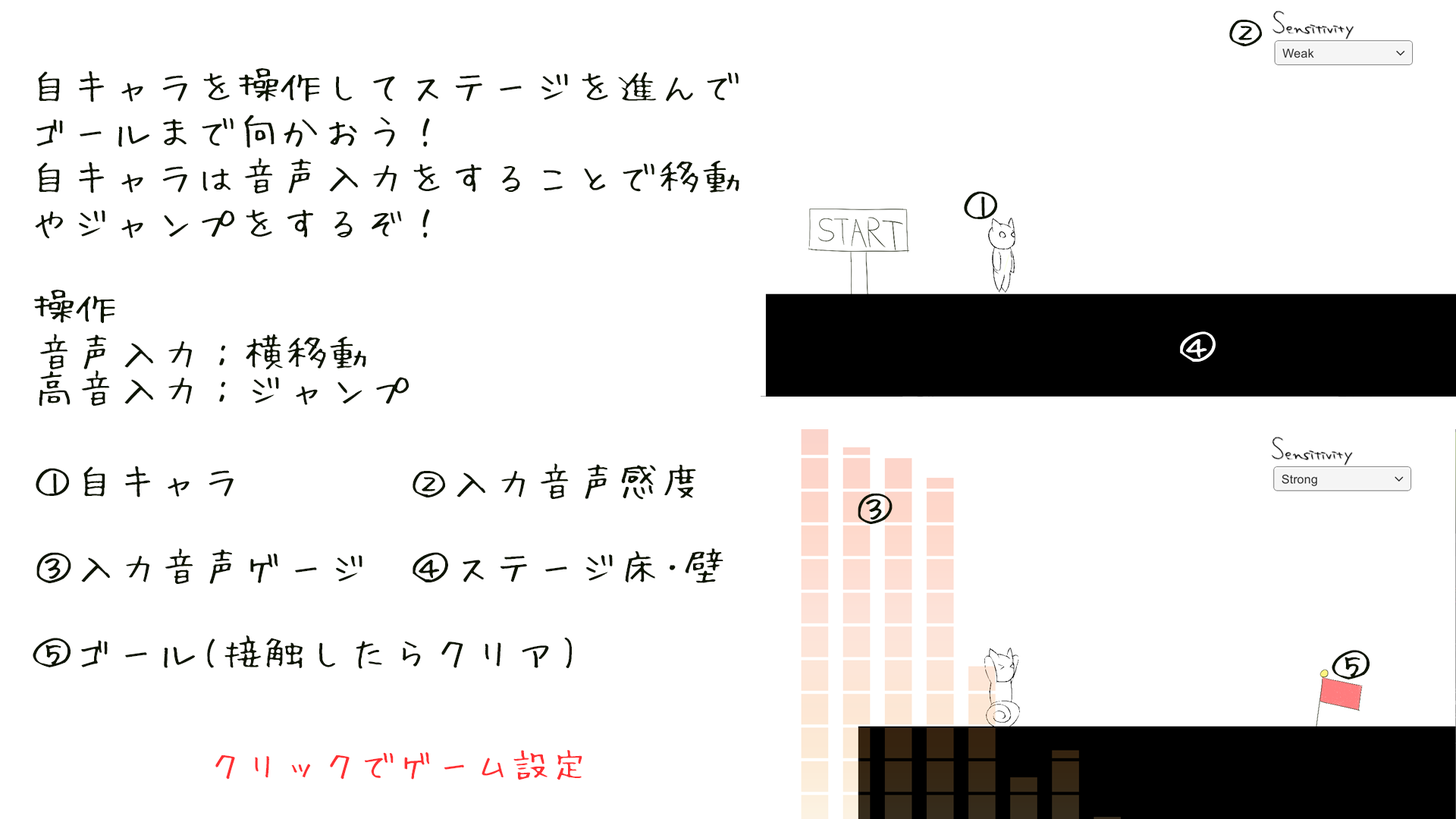
<style>
.page{position:relative;width:1456px;height:819px;background:#ffffff}
.page>*{position:absolute;margin:0}
.t1{font:36.4px "HuiFont";letter-spacing:0.05em;color:#0d1401;scale:1.1 1}
.t2{font:36.4px/45.5px "HuiFont";letter-spacing:0.05em;color:#0d1401;scale:1.1 1}
.t3{font:36.4px/36.4px "HuiFont";letter-spacing:0.05em;color:#0d1401;scale:1.1 1}
.t4{font:36.4px "HuiFont";letter-spacing:0.05em;color:#ffffff;scale:1.1 1}
.t5{font:33.1px "HuiFont";letter-spacing:0.05em;color:#ff2f32;scale:1.1 1}
</style>
<div class="page">
<p class="t1" style="left:1229px;top:20px;width:33px;height:26px">②</p>
<p class="t2" style="left:35px;top:68px;width:704px;height:171px">自キャラを操作してステージを進んで<br>ゴールまで向かおう！<br>自キャラは音声入力をすることで移動<br>やジャンプをするぞ！</p>
<p class="t1" style="left:964px;top:191px;width:33px;height:28px">①</p>
<p class="t3" style="left:34px;top:290px;width:375px;height:116px"><span class="t2">操作<br></span>音声入力：横移動<br>高音入力：ジャンプ</p>
<p class="t4" style="left:1180px;top:331px;width:36px;height:31px">④</p>
<p class="t1" style="left:36px;top:466px;width:198px;height:31px">①自キャラ</p>
<p class="t1" style="left:413px;top:463px;width:283px;height:37px">②入力音声感度</p>
<p class="t1" style="left:858px;top:493px;width:35px;height:31px">③</p>
<p class="t1" style="left:36px;top:548px;width:326px;height:36px">③入力音声ゲージ</p>
<p class="t1" style="left:413px;top:548px;width:310px;height:35px">④ステージ床･壁</p>
<p class="t1" style="left:33px;top:635px;width:539px;height:34px">⑤ゴール(接触したらクリア)</p>
<p class="t1" style="left:1332px;top:650px;width:38px;height:29px">⑤</p>
<p class="t5" style="left:215px;top:750px;width:367px;height:30px">クリックでゲーム設定</p>
</div>
